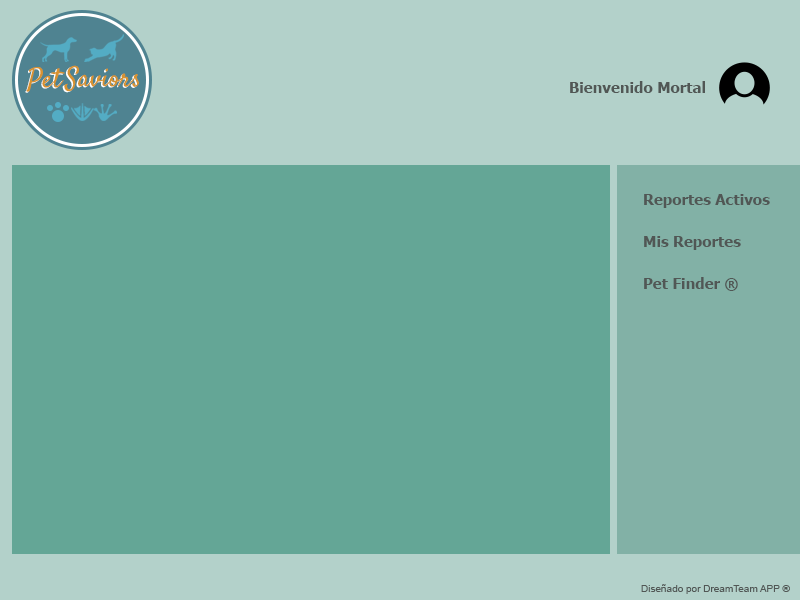
<style>
.page{position:relative;width:800px;height:600px;background:#64a696}
.page>*{position:absolute;margin:0}
.t1{font:27.3px "Satisfy";color:#d79331}
.t2{font:27.3px "Satisfy"}
.t3{font:27.3px "Satisfy";color:#d79230}
.t4{font:15px "Tahoma-Bold";color:#515755}
.t5{font:10px "ArialMT";color:#515755}
</style>
<div class="page">
<p class="t1" style="left:64px;top:65px;width:75px;height:27px">Saviors</p>
<p class="t2" style="left:25px;top:68px;width:38px;height:25px">Pet</p>
<p class="t3" style="left:26px;top:67px;width:39px;height:25px">Pet</p>
<p class="t2" style="left:62px;top:66px;width:76px;height:27px">Saviors</p>
<p class="t4" style="left:570px;top:81px;width:135px;height:12px">Bienvenido Mortal</p>
<p class="t4" style="left:644px;top:194px;width:126px;height:14px">Reportes Activos</p>
<p class="t4" style="left:644px;top:236px;width:97px;height:14px">Mis Reportes</p>
<p class="t4" style="left:644px;top:277px;width:94px;height:14px">Pet Finder ®</p>
<p class="t5" style="left:641px;top:584px;width:149px;height:10px">Diseñado por DreamTeam APP ®</p>
</div>
